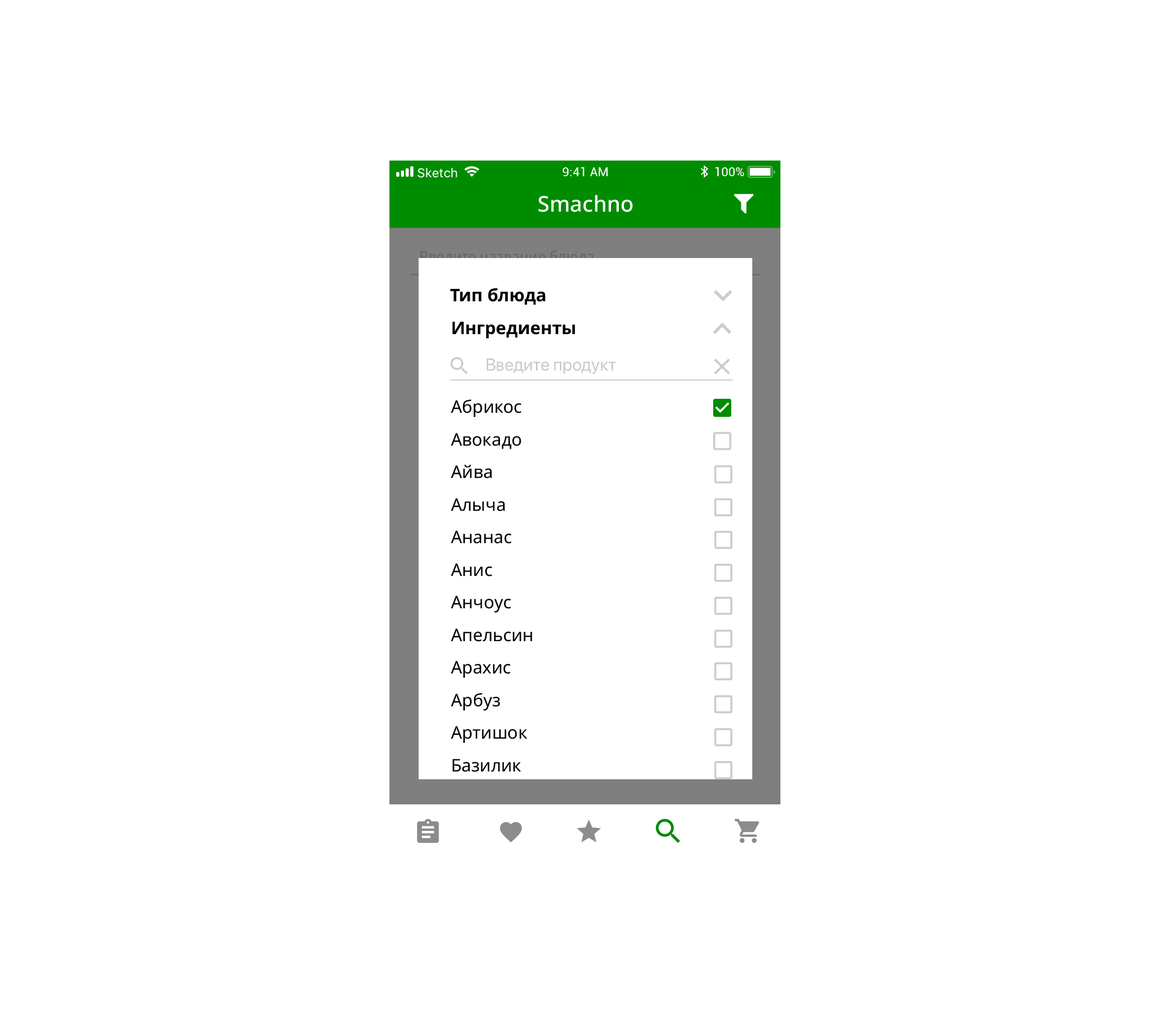
<style>
.page{position:relative;width:1173px;height:1017px;background:#ffffff}
.page>*{position:absolute;margin:0}
.t1{font:21.7px "NotoSans-Medium";color:#ffffff}
.t2{font:17.4px "NotoSans-Bold";color:#000000}
.t3{font:17.3px "SFProDisplay-Regular";color:#c9c9c9}
.t4{font:17.4px/32.6px "NotoSans-Regular";color:#000000}
</style>
<div class="page">
<p class="t1" style="left:538px;top:195px;width:95px;height:17px">Smachno</p>
<p class="t2" style="left:450px;top:288px;width:95px;height:17px">Тип блюда</p>
<p class="t2" style="left:452px;top:322px;width:123px;height:16px">Ингредиенты</p>
<p class="t3" style="left:486px;top:358px;width:130px;height:16px">Введите продукт</p>
<p class="t4" style="left:451px;top:399px;width:81px;height:405px">Абрикос<br>Авокадо<br>Айва<br>Алыча<br>Ананас<br>Анис<br>Анчоус<br>Апельсин<br>Арахис<br>Арбуз<br>Артишок<br>Базилик<br>Балык</p>
</div>
